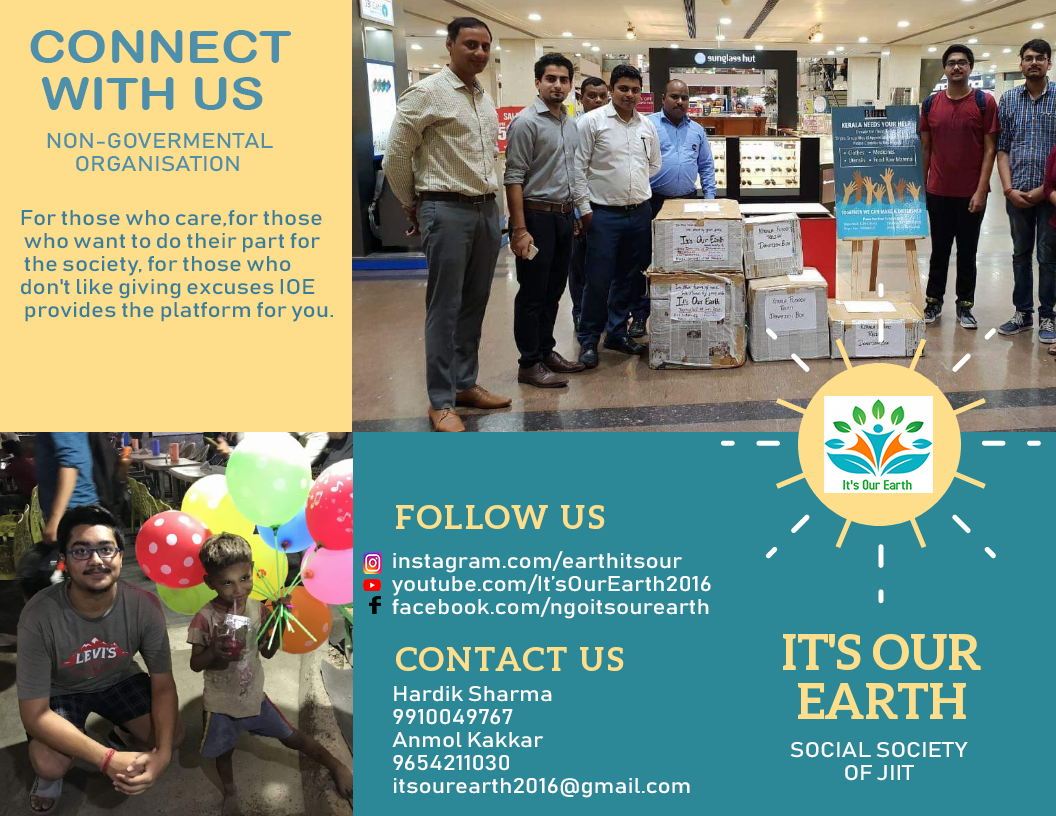
<style>
.page{position:relative;width:1056px;height:816px;background:#2c8896}
.page>*{position:absolute;margin:0}
.t1{font:45px/47px "ArialRoundedMTBold";color:#4e8faa;scale:1.15 1}
.t2{font:21px/23px "Bahnschrift";color:#4e8faa;scale:1.15 1}
.t3{font:21px/23px "Bahnschrift";color:#377f9d;scale:1.15 1}
.t4{font:21px/23px "Bahnschrift";color:#fafcfd;scale:1.15 1}
</style>
<div class="page">
<p class="t1" style="left:30px;top:30px;width:262px;height:80px">CONNECT <br> WITH US</p>
<p class="t2" style="left:47px;top:133px;width:226px;height:39px">NON-GOVERMENTAL <br>       ORGANISATION</p>
<p class="t3" style="left:21px;top:210px;width:312px;height:112px">For those who care,for those<br> who want to do their part for<br> the society, for those who <br>don't like giving excuses IOE<br> provides the platform for you.</p>
<p class="t4" style="left:392px;top:551px;width:319px;height:68px">instagram.com/earthitsour<br>youtube.com/It’sOurEarth2016<br>facebook.com/ngoitsourearth</p>
<p class="t4" style="left:392px;top:686px;width:298px;height:112px">Hardik Sharma<br>9910049767<br>Anmol Kakkar<br>9654211030<br>itsourearth2016@gmail.com</p>
<p class="t4" style="left:790px;top:742px;width:178px;height:39px">SOCIAL SOCIETY <br>             OF JIIT</p>
</div>
